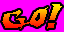
<style>
.page{position:relative;width:64px;height:32px;background:#ff00ff}
.page>*{position:absolute;margin:0}
.t1{font:42px "Electrox"}
</style>
<div class="page">
<p class="t1" style="left:2px;top:4px;width:60px;height:25px">GO!</p>
</div>
